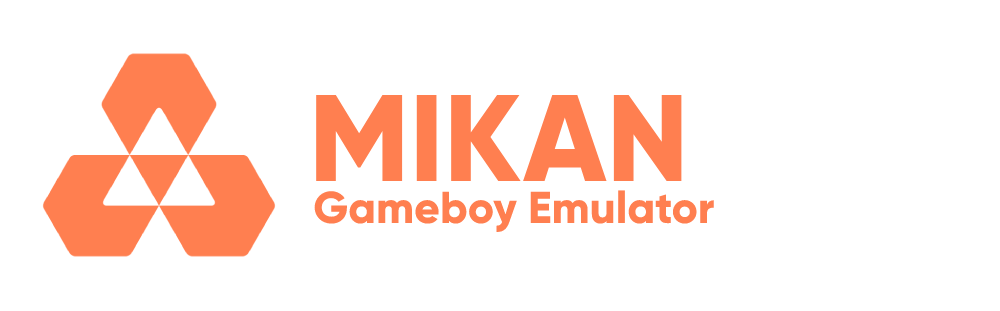
<style>
.page{position:relative;width:1000px;height:311px;background:#ffffff}
.page>*{position:absolute;margin:0}
.t1{font:122.7px "Gilroy-ExtraBold";color:#ff7f50}
.t2{font:44.6px "Gilroy-ExtraBold";color:#ff7f50}
</style>
<div class="page">
<p class="t1" style="left:316px;top:95px;width:366px;height:86px">MIKAN</p>
<p class="t2" style="left:314px;top:190px;width:400px;height:43px">Gameboy Emulator</p>
</div>
